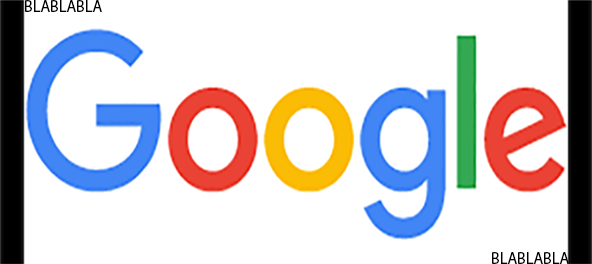
<style>
.page{position:relative;width:592px;height:264px;background:#ffffff}
.page>*{position:absolute;margin:0}
.t1{font:12.6px "MyriadPro-Regular";color:#000000;scale:0.95 1}
</style>
<div class="page">
<p class="t1" style="left:25px;top:0px;width:77px;height:12px">BLABLABLA</p>
<p class="t1" style="left:492px;top:252px;width:77px;height:12px">BLABLABLA</p>
</div>
